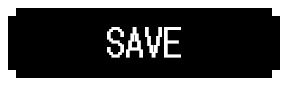
<style>
.page{position:relative;width:288px;height:86px;background:#000000}
.page>*{position:absolute;margin:0}
.t1{font:36px "DotGothic16-Regular";color:#ffffff;font-weight:bold}
</style>
<div class="page">
<p class="t1" style="left:107px;top:27px;width:74px;height:31px">SAVE</p>
</div>
